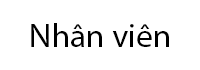
<style>
.page{position:relative;width:200px;height:70px;background:#ffffff}
.page>*{position:absolute;margin:0}
.t1{font:32.9px "MyriadPro-Regular";color:#000000}
</style>
<div class="page">
<p class="t1" style="left:31px;top:23px;width:138px;height:24px">Nhân viên</p>
</div>
